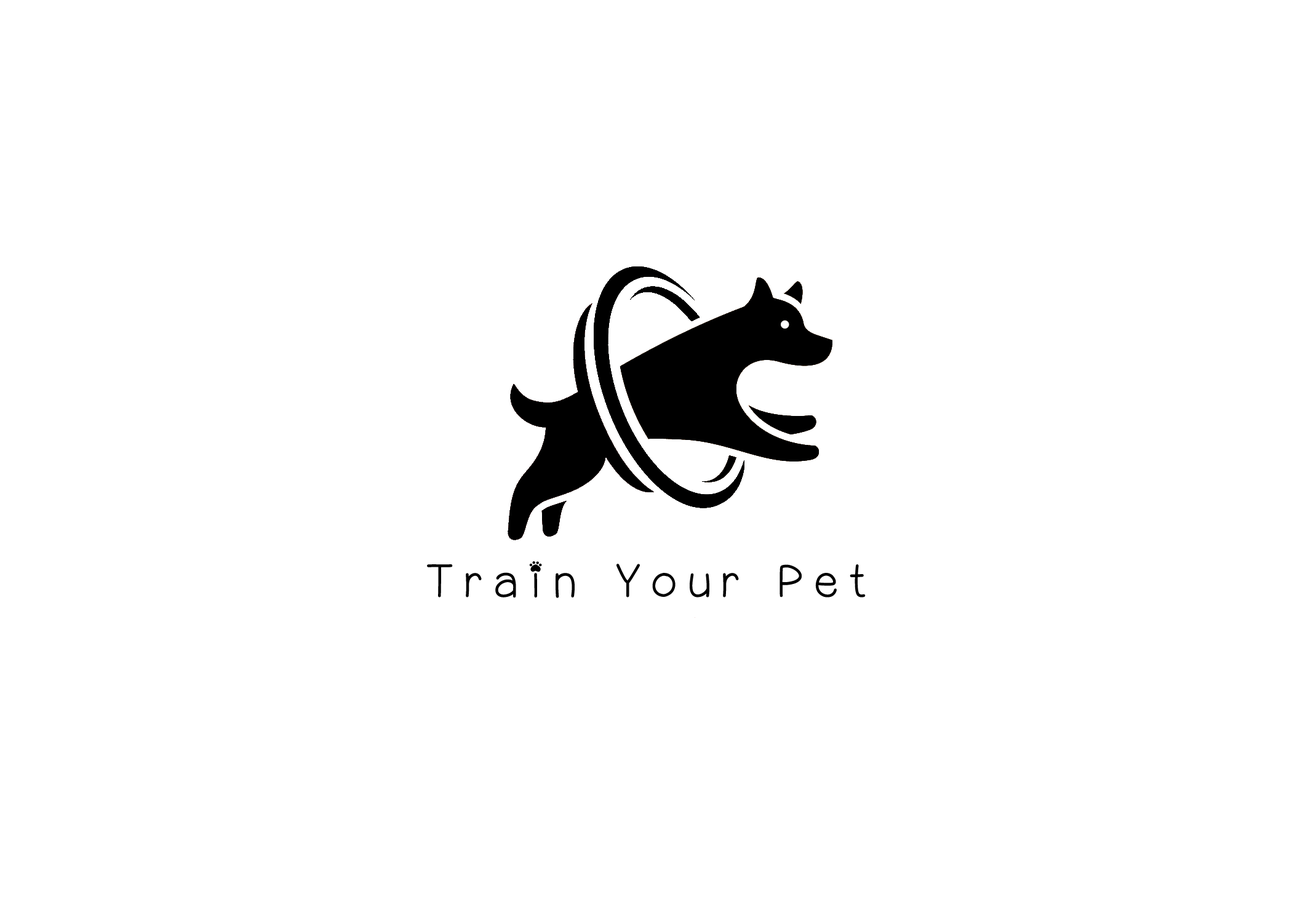
<style>
.page{position:relative;width:1292px;height:923px;background:#ffffff}
.page>*{position:absolute;margin:0}
.t1{font:46.1px "PuppyBellies";letter-spacing:0.28em;color:#000000}
</style>
<div class="page">
<p class="t1" style="left:427px;top:561px;width:439px;height:37px">Train Your Pet</p>
</div>
